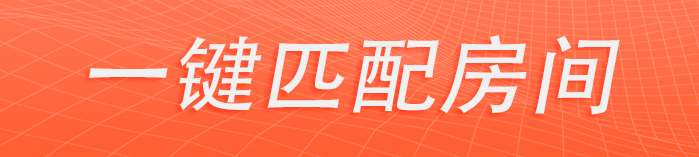
<style>
.page{position:relative;width:699px;height:157px}
.page>*{position:absolute;margin:0}
.t1{font:85.9px "AdobeHeitiStd-Regular";color:#f0f0f0;font-style:italic;scale:1.05 1}
</style>
<div class="page">
<p class="t1" style="left:89px;top:35px;width:531px;height:80px">一键匹配房间</p>
</div>
